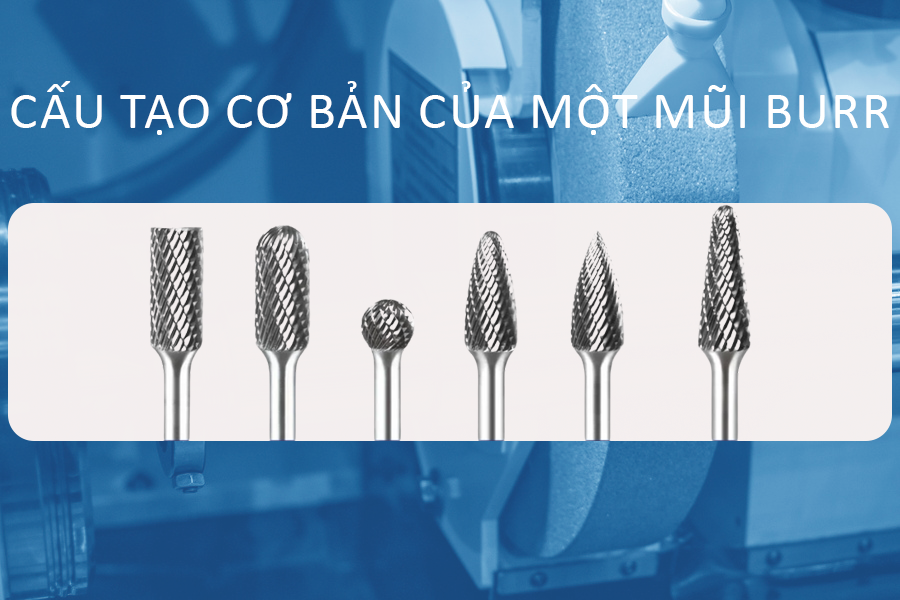
<style>
.page{position:relative;width:900px;height:600px}
.page>*{position:absolute;margin:0}
.t1{font:53.2px "Calibri";color:#ffffff;text-transform:uppercase}
</style>
<div class="page">
<p class="t1" style="left:11px;top:81px;width:878px;height:54px">cấu tạo cơ bản của một mũi burr</p>
</div>
